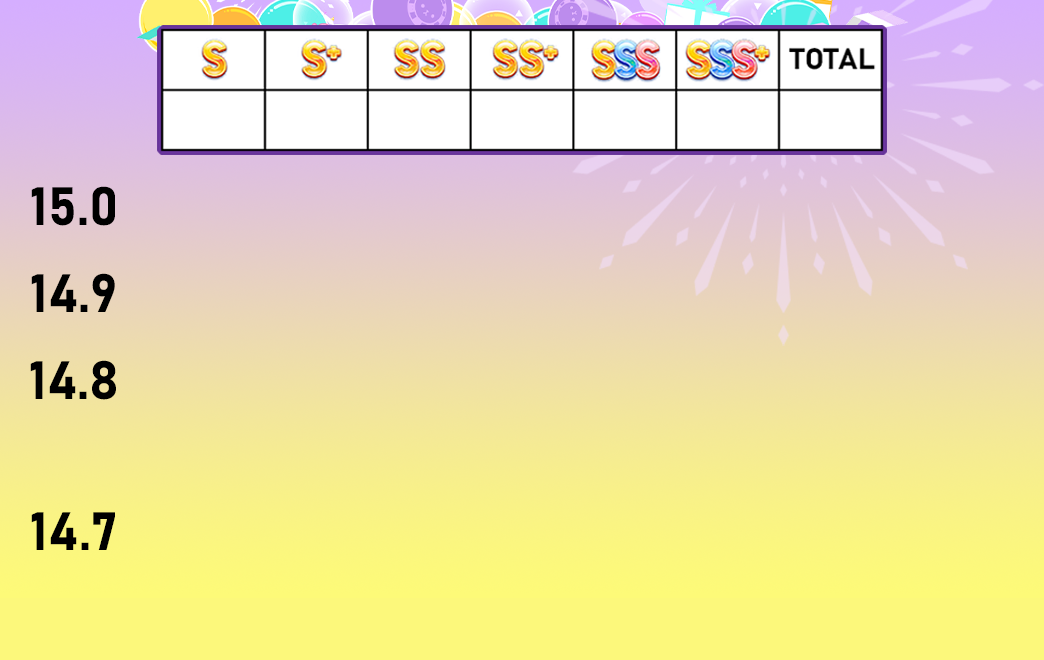
<style>
.page{position:relative;width:1044px;height:660px}
.page>*{position:absolute;margin:0}
.t1{font:53.3px "Bahnschrift-Bold";color:#000000}
</style>
<div class="page">
<p class="t1" style="left:31px;top:186px;width:84px;height:40px">15.0</p>
<p class="t1" style="left:31px;top:273px;width:84px;height:39px">14.9</p>
<p class="t1" style="left:30px;top:360px;width:86px;height:40px">14.8</p>
<p class="t1" style="left:31px;top:512px;width:84px;height:38px">14.7</p>
</div>
